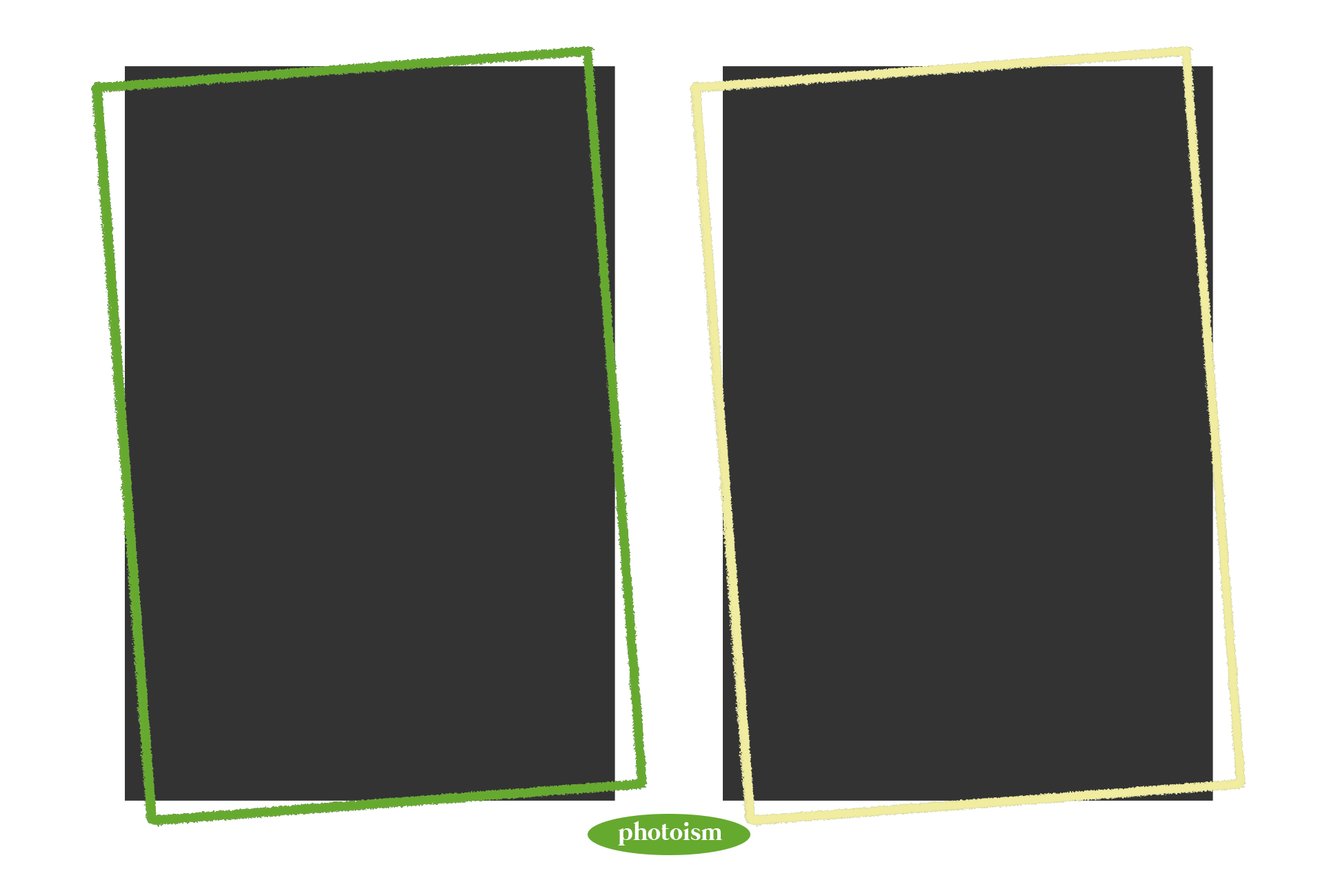
<style>
.page{position:relative;width:1338px;height:891px;background:#333333}
.page>*{position:absolute;margin:0}
.t1{font:25.9px "Mermaid-Bold";color:#ffffff}
</style>
<div class="page">
<p class="t1" style="left:618px;top:821px;width:105px;height:25px">photoism</p>
</div>
